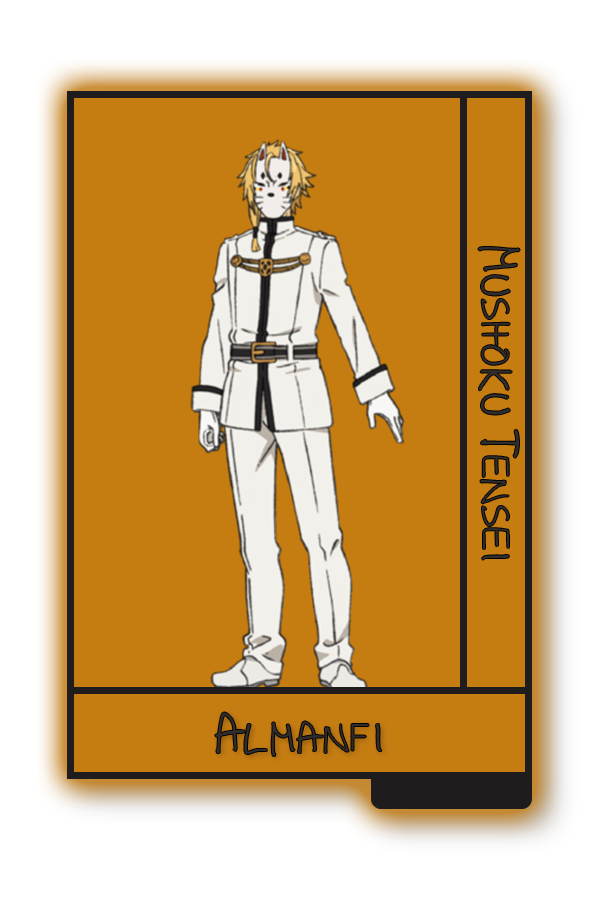
<style>
.page{position:relative;width:600px;height:900px;background:#c57d12}
.page>*{position:absolute;margin:0}
.t1{font:41px "AllCaps";color:#312d2d}
.t2{font:43.2px "AllCaps";color:#312d2d}
</style>
<div class="page">
<p class="t1" style="left:478px;top:247px;width:42px;height:313px;rotate:90deg">Mushoku Tensei</p>
<p class="t2" style="left:215px;top:712px;width:167px;height:44px">Almanfi</p>
</div>
